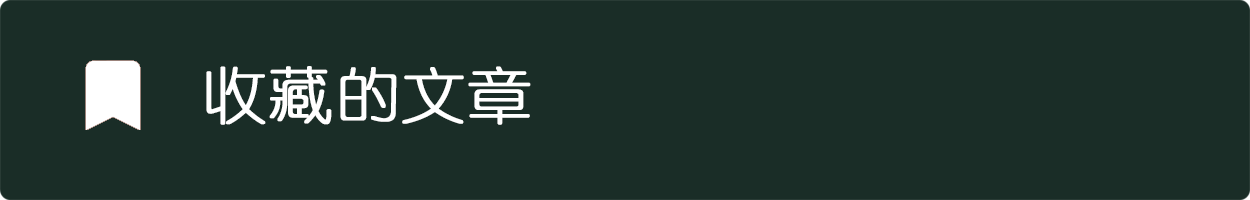
<style>
.page{position:relative;width:1250px;height:200px;background:#1a2d27}
.page>*{position:absolute;margin:0}
.t1{font:60.8px "YouYuan";letter-spacing:0.01em;color:#ffffff;font-weight:bold;scale:1.05 1}
</style>
<div class="page">
<p class="t1" style="left:206px;top:66px;width:325px;height:59px">收藏的文章</p>
</div>
